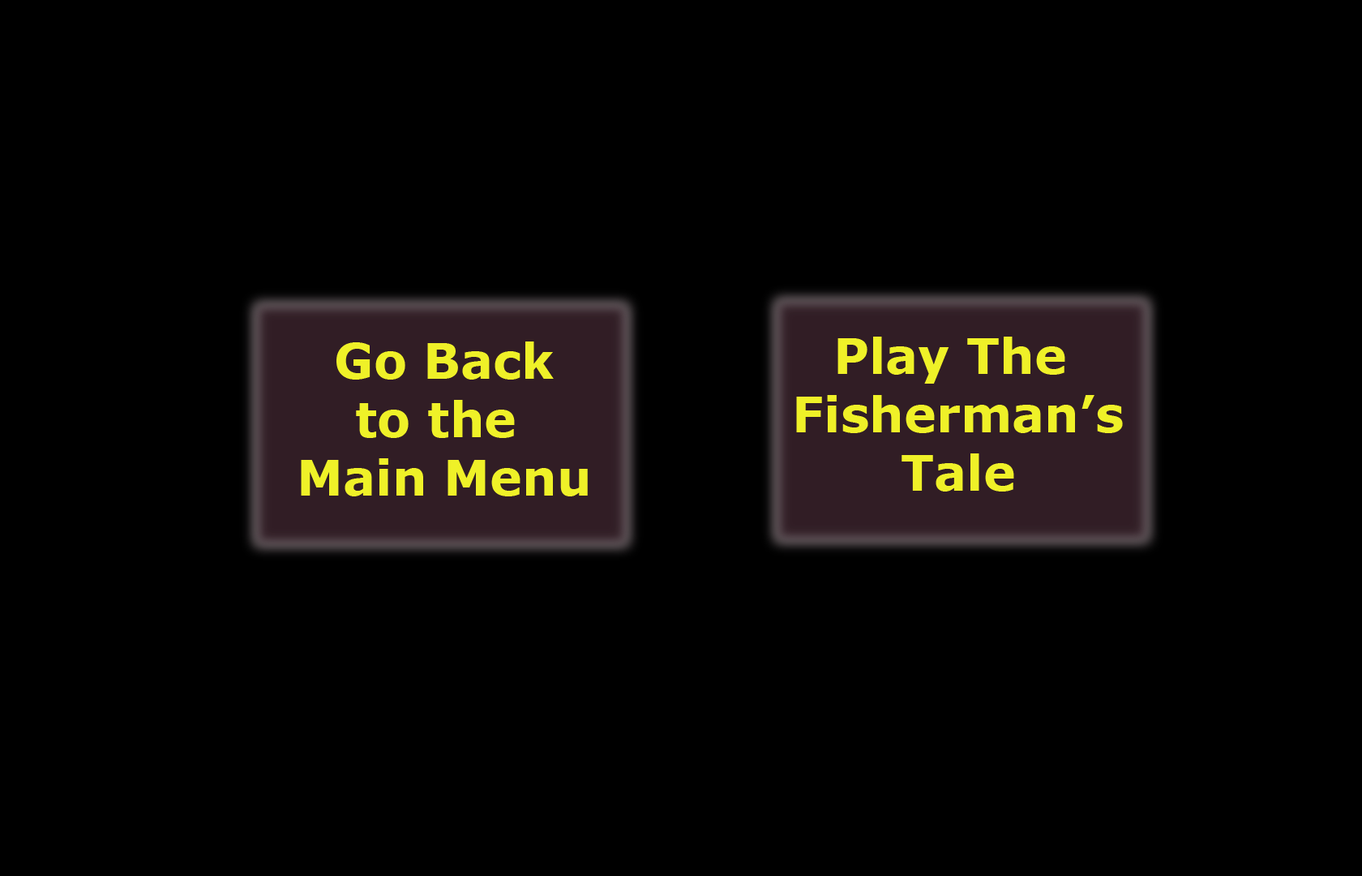
<style>
.page{position:relative;width:1362px;height:876px;background:#000000}
.page>*{position:absolute;margin:0}
.t1{font:48.6px "Verdana-Bold";color:#eff128}
</style>
<div class="page">
<p class="t1" style="left:301px;top:341px;width:287px;height:155px;text-align:center">Go Back<br>to the <br>Main Menu</p>
<p class="t1" style="left:796px;top:336px;width:327px;height:155px;text-align:center">Play The <br>Fisherman’s<br>Tale</p>
</div>
